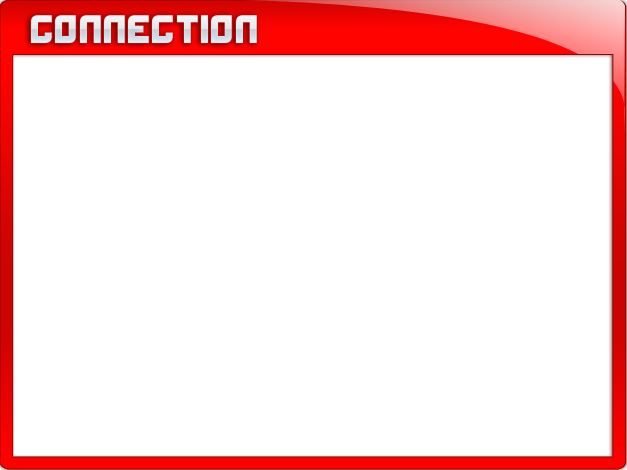
<style>
.page{position:relative;width:627px;height:470px;background:#ffffff}
.page>*{position:absolute;margin:0}
.t1{font:35.5px "Xifiction";color:#e3ecf1}
</style>
<div class="page">
<p class="t1" style="left:31px;top:15px;width:226px;height:28px">CONNECTION</p>
</div>
